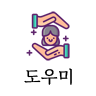
<style>
.page{position:relative;width:96px;height:96px;background:#ffffff}
.page>*{position:absolute;margin:0}
.t1{font:18px "GowunBatang-Regular";color:#000000;font-weight:bold}
</style>
<div class="page">
<p class="t1" style="left:24px;top:68px;width:48px;height:17px">도우미</p>
</div>
